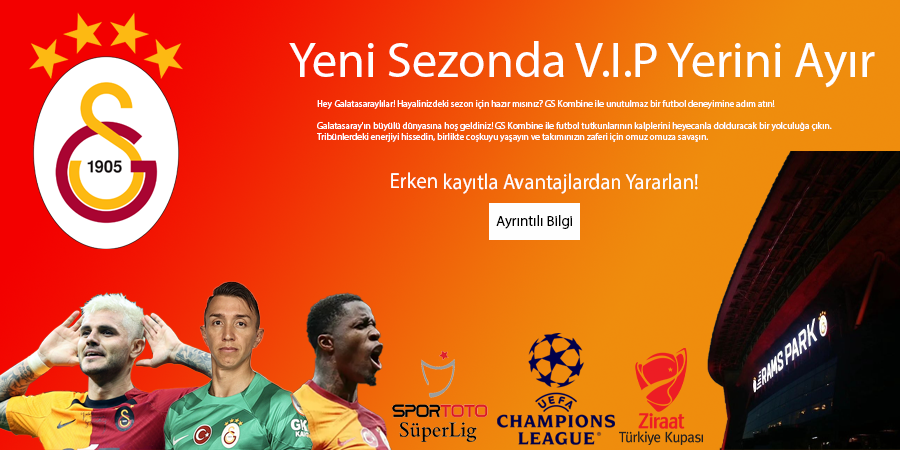
<style>
.page{position:relative;width:900px;height:450px}
.page>*{position:absolute;margin:0}
.t1{font:50px "MyriadPro-Regular";color:#ffffff}
.t2{font:9.3px "MyriadPro-Regular";color:#fefefe}
.t3{font:21.8px "MyriadPro-Regular";color:#fefefe;scale:0.94 1}
.t4{font:14.8px "MyriadPro-Regular";color:#000000}
</style>
<div class="page">
<p class="t1" style="left:289px;top:41px;width:586px;height:47px">Yeni Sezonda V.I.P Yerini Ayır</p>
<p class="t2" style="left:317px;top:100px;width:515px;height:42px">Hey Galatasaraylılar! Hayalinizdeki sezon için hazır mısınız? GS Kombine ile unutulmaz bir futbol deneyimine adım atın!<br><br>Galatasaray'ın büyülü dünyasına hoş geldiniz! GS Kombine ile futbol tutkunlarının kalplerini heyecanla dolduracak bir yolculuğa çıkın.  <br>Tribünlerdeki enerjiyi hissedin, birlikte coşkuyu yaşayın ve takımınızın zaferi için omuz omuza savaşın.</p>
<p class="t3" style="left:391px;top:172px;width:307px;height:22px">Erken kayıtla Avantajlardan Yararlan!</p>
<p class="t4" style="left:496px;top:215px;width:76px;height:14px">Ayrıntılı Bilgi</p>
</div>
